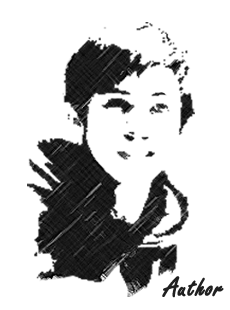
<style>
.page{position:relative;width:230px;height:310px;background:#ffffff}
.page>*{position:absolute;margin:0}
.t1{font:29.2px "FreestyleScript-Regular";letter-spacing:0.01em;color:#202020;font-weight:bold}
</style>
<div class="page">
<p class="t1" style="left:162px;top:276px;width:62px;height:22px">Author</p>
</div>
